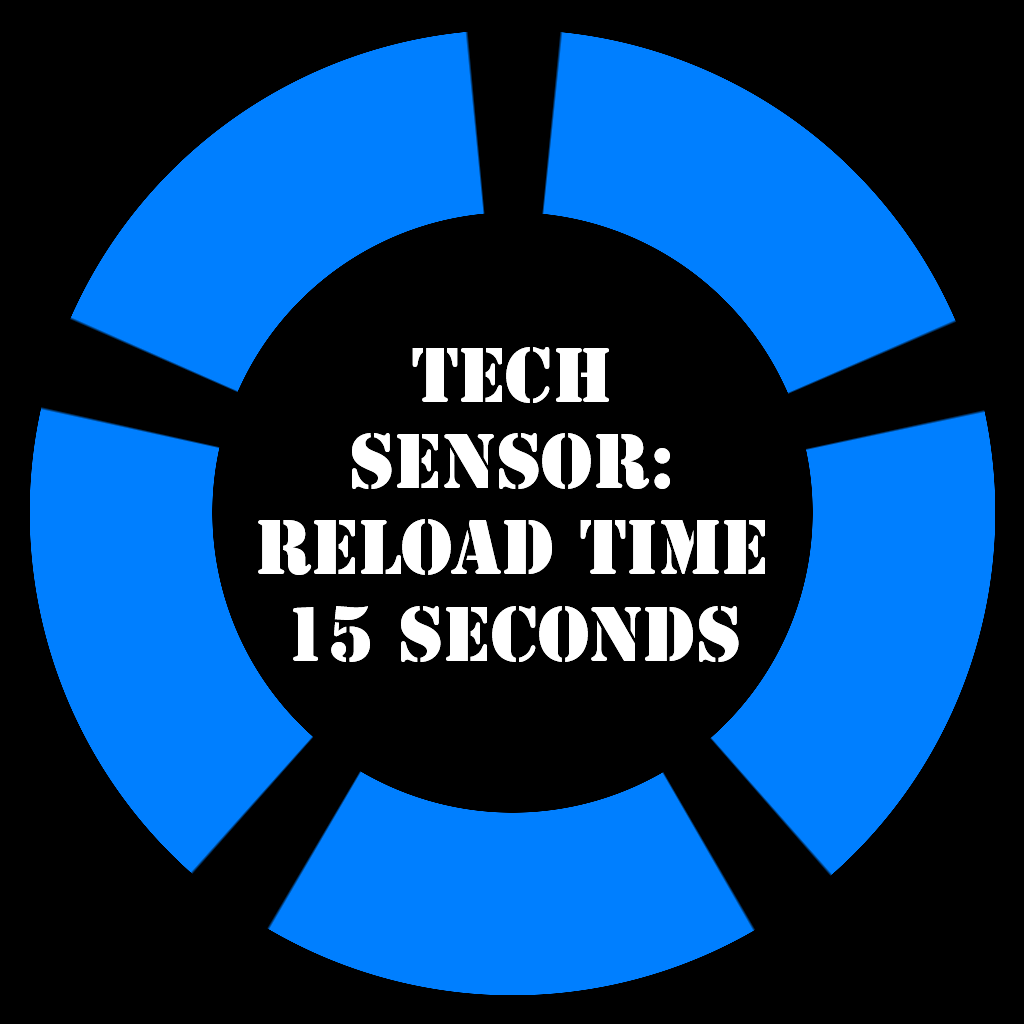
<style>
.page{position:relative;width:1024px;height:1024px;background:#000000}
.page>*{position:absolute;margin:0}
.t1{font:72px "StencilStd";color:#ffffff}
</style>
<div class="page">
<p class="t1" style="left:258px;top:347px;width:507px;height:315px;text-align:center">Tech<br>Sensor:<br>Reload time<br>15 Seconds</p>
</div>
